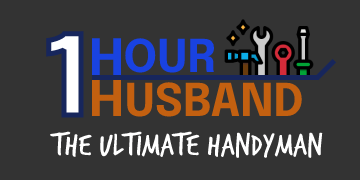
<style>
.page{position:relative;width:360px;height:180px;background:#333333}
.page>*{position:absolute;margin:0}
.t1{font:110px "Epilogue-Bold"}
.t2{font:50px "Epilogue-Bold";color:#1943e1}
.t3{font:45px "Epilogue-Bold";color:#1942e1}
.t4{font:50px "Epilogue-Bold";color:#1942e1}
.t5{font:50px "Epilogue-Bold";color:#c36010}
.t6{font:45px "Epilogue-Bold";color:#c36010}
.t7{font:34px "TrashHand";color:#ffffff}
</style>
<div class="page">
<p class="t1" style="left:45px;top:30px;width:40px;height:88px">1</p>
<p class="t2" style="left:92px;top:38px;width:29px;height:37px">H</p>
<p class="t3" style="left:125px;top:38px;width:90px;height:35px"><span class="t4">   </span>OUR</p>
<p class="t5" style="left:92px;top:79px;width:29px;height:37px">H</p>
<p class="t6" style="left:127px;top:82px;width:175px;height:35px"><span class="t5">   </span>USBAND</p>
<p class="t7" style="left:50px;top:131px;width:273px;height:27px">The Ultimate Handyman</p>
</div>
